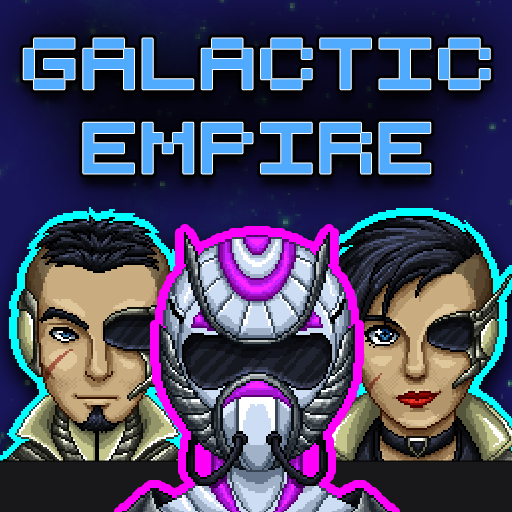
<style>
.page{position:relative;width:512px;height:512px}
.page>*{position:absolute;margin:0}
.t1{font:70.2px "RetroComputer";color:#50abff}
</style>
<div class="page">
<p class="t1" style="left:23px;top:38px;width:467px;height:136px;text-align:center">Galactic<br>Empire</p>
</div>
